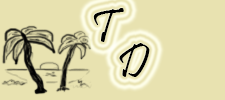
<style>
.page{position:relative;width:225px;height:100px;background:#e8e2b0}
.page>*{position:absolute;margin:0}
.t1{font:48px "Pristina-Regular";color:#000000}
</style>
<div class="page">
<p class="t1" style="left:93px;top:8px;width:31px;height:34px">T</p>
<p class="t1" style="left:119px;top:43px;width:31px;height:34px">D</p>
</div>
